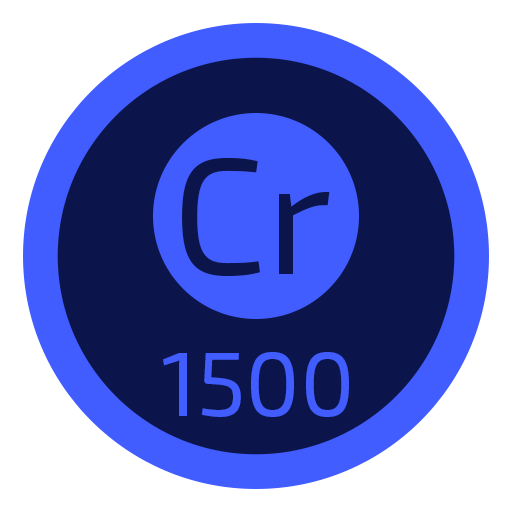
<style>
.page{position:relative;width:512px;height:512px;background:#ffffff}
.page>*{position:absolute;margin:0}
.t1{font:165.1px "Exo2-Regular";color:#0c154b}
.t2{font:90.9px "Exo2-Regular";color:#425dff}
</style>
<div class="page">
<p class="t1" style="left:182px;top:157px;width:148px;height:120px">Cr</p>
<p class="t2" style="left:163px;top:352px;width:186px;height:65px">1500</p>
</div>
